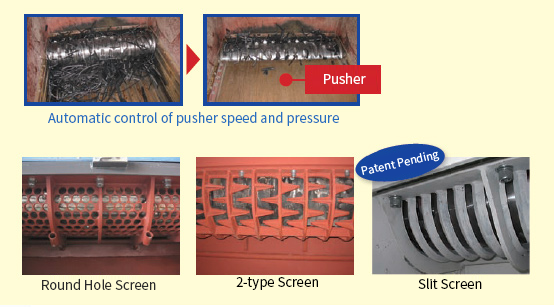
<style>
.page{position:relative;width:554px;height:307px;background:#fffcd7}
.page>*{position:absolute;margin:0}
.t1{font:13px "NotoSansCJKkr-Regular";color:#ffffff}
.t2{font:13px "NotoSansCJKkr-Regular";color:#256ec0}
.t3{font:13px "NotoSansCJKkr-Regular";color:#2a2a2a}
.t4{font:13px "NotoSansCJKkr-Regular";color:#000000}
</style>
<div class="page">
<p class="t1" style="left:324px;top:72px;width:42px;height:12px">Pusher</p>
<p class="t2" style="left:48px;top:111px;width:291px;height:15px">Automatic control of pusher speed and pressure</p>
<p class="t3" style="left:42px;top:278px;width:114px;height:12px">Round Hole Screen</p>
<p class="t4" style="left:236px;top:277px;width:82px;height:13px">2-type Screen</p>
<p class="t4" style="left:418px;top:278px;width:64px;height:11px">Slit Screen</p>
</div>
